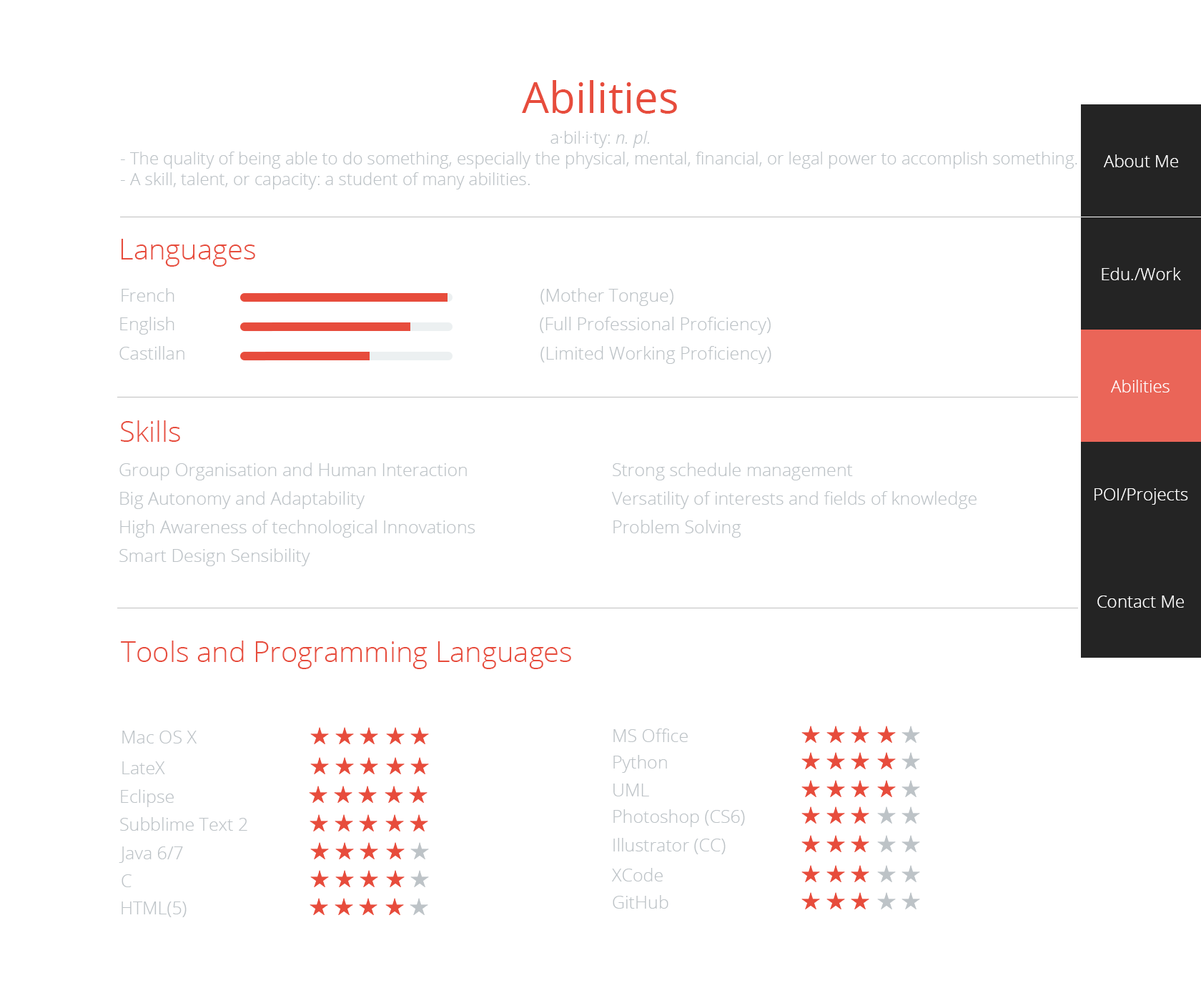
<style>
.page{position:relative;width:1201px;height:993px;background:#ffffff}
.page>*{position:absolute;margin:0}
.t1{font:42.9px "OpenSans";color:#e74c3c}
.t2{font:17.2px "OpenSans-Light";color:#bdc3c7}
.t3{font:17.2px "OpenSansLight-Italic";color:#bdc3c7}
.t4{font:17.2px "OpenSans-Light";color:#ffffff}
.t5{font:28.6px "OpenSans-Light";color:#e74c3c}
.t6{font:17.9px "OpenSans-Light";color:#bdc3c7}
.t7{font:17.9px/28.6px "OpenSans-Light";color:#bdc3c7}
</style>
<div class="page">
<p class="t1" style="left:522px;top:80px;width:155px;height:34px">Abilities</p>
<p class="t2" style="left:121px;top:131px;width:956px;height:58px;text-align:center">a·bil·i·ty: <span class="t3">n. pl.</span> <br>- The quality of being able to do something, especially the physical, mental, financial, or legal power to accomplish something.<br>- A skill, talent, or capacity: a student of many abilities.</p>
<p class="t4" style="left:1104px;top:154px;width:74px;height:13px">About Me</p>
<p class="t5" style="left:121px;top:239px;width:134px;height:28px">Languages</p>
<p class="t4" style="left:1102px;top:267px;width:79px;height:13px">Edu./Work</p>
<p class="t6" style="left:122px;top:288px;width:52px;height:14px">French</p>
<p class="t6" style="left:540px;top:288px;width:133px;height:18px">(Mother Tongue)</p>
<p class="t6" style="left:120px;top:317px;width:54px;height:18px">English</p>
<p class="t6" style="left:540px;top:317px;width:231px;height:18px">(Full Professional Proficiency)</p>
<p class="t6" style="left:119px;top:346px;width:65px;height:14px">Castillan</p>
<p class="t6" style="left:540px;top:346px;width:231px;height:18px">(Limited Working Proficiency)</p>
<p class="t4" style="left:1111px;top:380px;width:58px;height:12px">Abilities</p>
<p class="t5" style="left:121px;top:420px;width:59px;height:22px">Skills</p>
<p class="t7" style="left:119px;top:463px;width:356px;height:103px">Group Organisation and Human Interaction<br>Big Autonomy and Adaptability<br>High Awareness of technological Innovations<br>Smart Design Sensibility</p>
<p class="t7" style="left:612px;top:463px;width:364px;height:75px">Strong schedule management<br>Versatility of interests and fields of knowledge<br>Problem Solving</p>
<p class="t4" style="left:1094px;top:488px;width:94px;height:17px">POI/Projects</p>
<p class="t4" style="left:1097px;top:595px;width:87px;height:13px">Contact Me</p>
<p class="t5" style="left:121px;top:641px;width:450px;height:28px">Tools and Programming Languages</p>
<p class="t6" style="left:122px;top:731px;width:75px;height:12px">Mac OS X</p>
<p class="t6" style="left:613px;top:728px;width:75px;height:14px">MS Office</p>
<p class="t6" style="left:122px;top:761px;width:43px;height:13px">LateX</p>
<p class="t6" style="left:613px;top:755px;width:54px;height:18px">Python</p>
<p class="t6" style="left:613px;top:783px;width:36px;height:13px">UML</p>
<p class="t6" style="left:121px;top:789px;width:53px;height:18px">Eclipse</p>
<p class="t6" style="left:613px;top:809px;width:132px;height:18px">Photoshop (CS6)</p>
<p class="t6" style="left:120px;top:817px;width:127px;height:14px">Subblime Text 2</p>
<p class="t6" style="left:613px;top:838px;width:113px;height:16px">Illustrator (CC)</p>
<p class="t6" style="left:119px;top:846px;width:64px;height:17px">Java 6/7</p>
<p class="t6" style="left:612px;top:868px;width:51px;height:13px">XCode</p>
<p class="t6" style="left:122px;top:874px;width:10px;height:13px">C</p>
<p class="t6" style="left:122px;top:901px;width:65px;height:16px">HTML(5)</p>
<p class="t6" style="left:613px;top:895px;width:55px;height:14px">GitHub</p>
</div>
